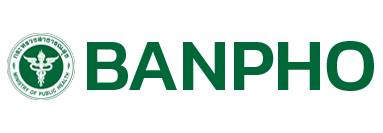
<style>
.page{position:relative;width:383px;height:133px;background:#ffffff}
.page>*{position:absolute;margin:0}
.t1{font:75px "Kanit-Medium";color:#006838}
</style>
<div class="page">
<p class="t1" style="left:87px;top:41px;width:287px;height:50px">BANPHO</p>
</div>
